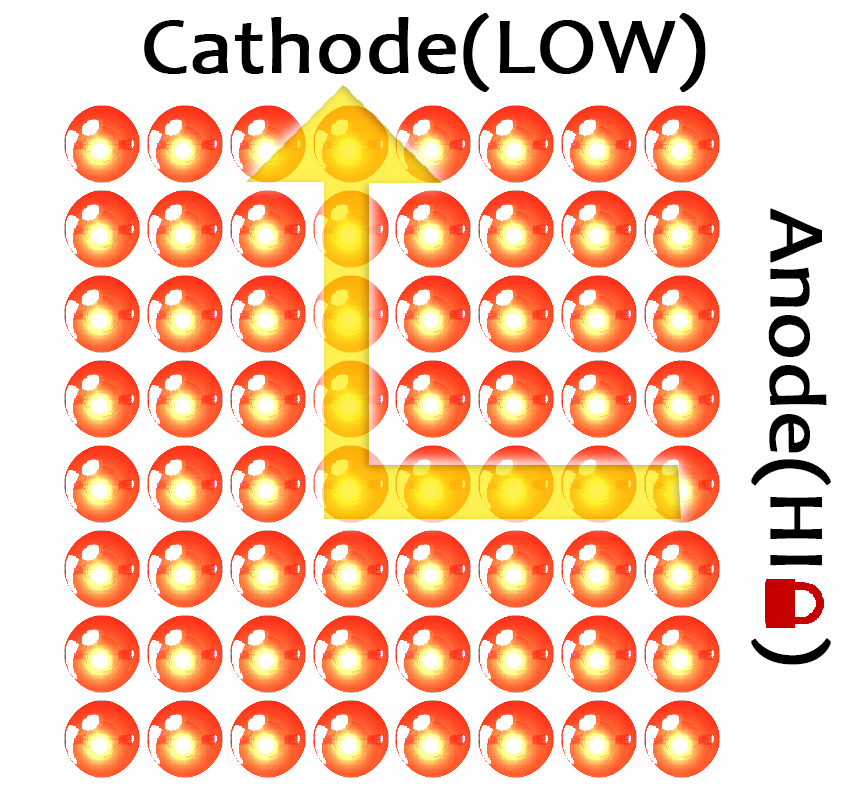
<style>
.page{position:relative;width:866px;height:786px;background:#ffffff}
.page>*{position:absolute;margin:0}
.t1{font:80.1px "Candara";color:#000000;font-weight:bold;scale:1.07 1}
</style>
<div class="page">
<p class="t1" style="left:144px;top:13px;width:562px;height:79px">Cathode(LOW)</p>
<p class="t1" style="left:751px;top:208px;width:80px;height:457px;rotate:90deg">Anode(HI   )</p>
</div>
